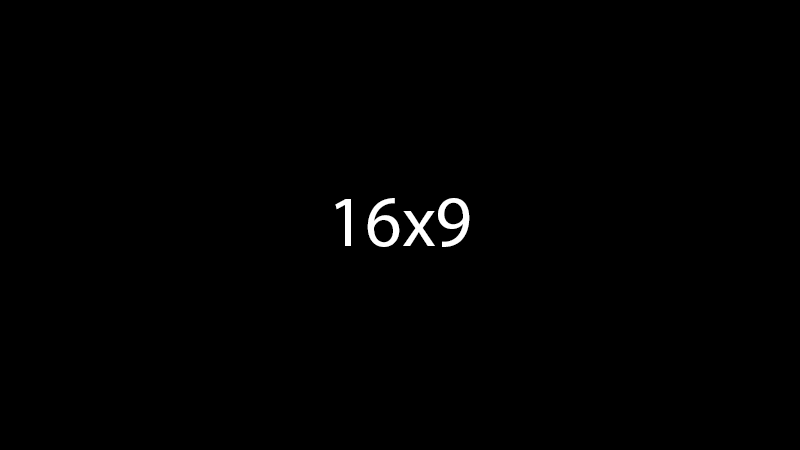
<style>
.page{position:relative;width:800px;height:450px;background:#000000}
.page>*{position:absolute;margin:0}
.t1{font:72px "MyriadPro-Regular";color:#ffffff}
</style>
<div class="page">
<p class="t1" style="left:335px;top:198px;width:135px;height:49px">16x9</p>
</div>
